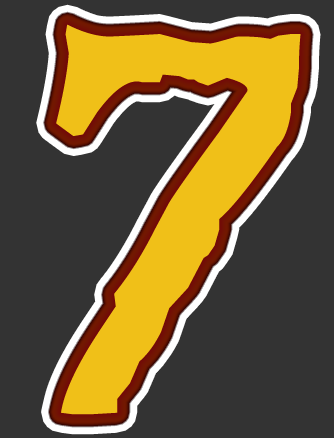
<style>
.page{position:relative;width:334px;height:438px;background:#333333}
.page>*{position:absolute;margin:0}
.t1{font:550px "PiecesofEight";letter-spacing:0.18em;color:#f0c018}
</style>
<div class="page">
<p class="t1" style="left:56px;top:24px;width:245px;height:391px">7</p>
</div>
